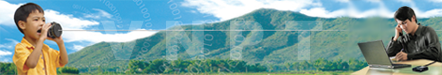
<style>
.page{position:relative;width:442px;height:75px}
.page>*{position:absolute;margin:0}
.t1{font:55px "Arial-Black"}
</style>
<div class="page">
<p class="t1" style="left:101px;top:20px;width:222px;height:40px">V N P T</p>
</div>
